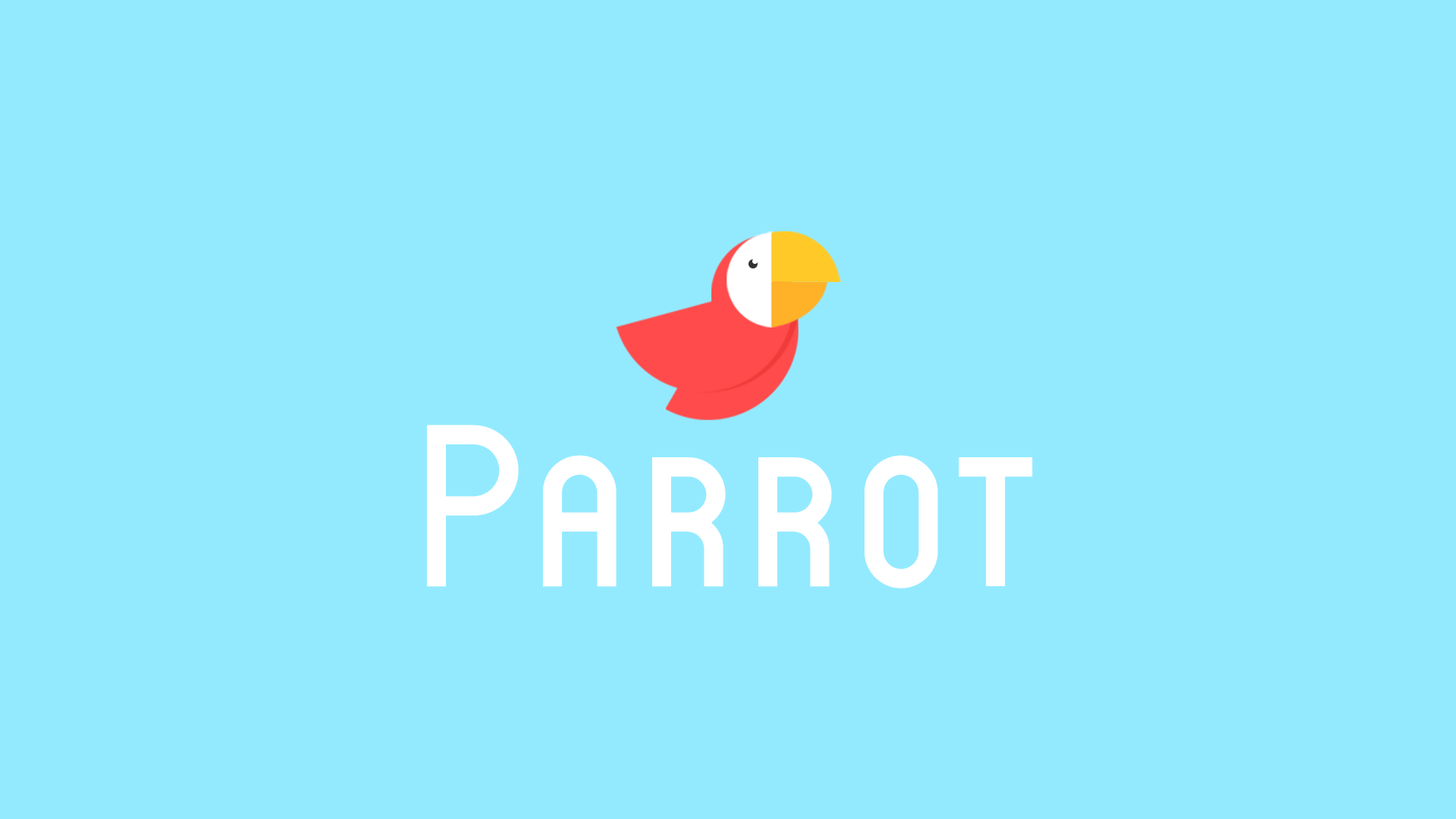
<style>
.page{position:relative;width:1456px;height:819px;background:#93eaff}
.page>*{position:absolute;margin:0}
.t1{font:229.8px "Circula-Medium";letter-spacing:0.075em;color:#ffffff}
</style>
<div class="page">
<p class="t1" style="left:427px;top:425px;width:606px;height:163px">Parrot</p>
</div>
